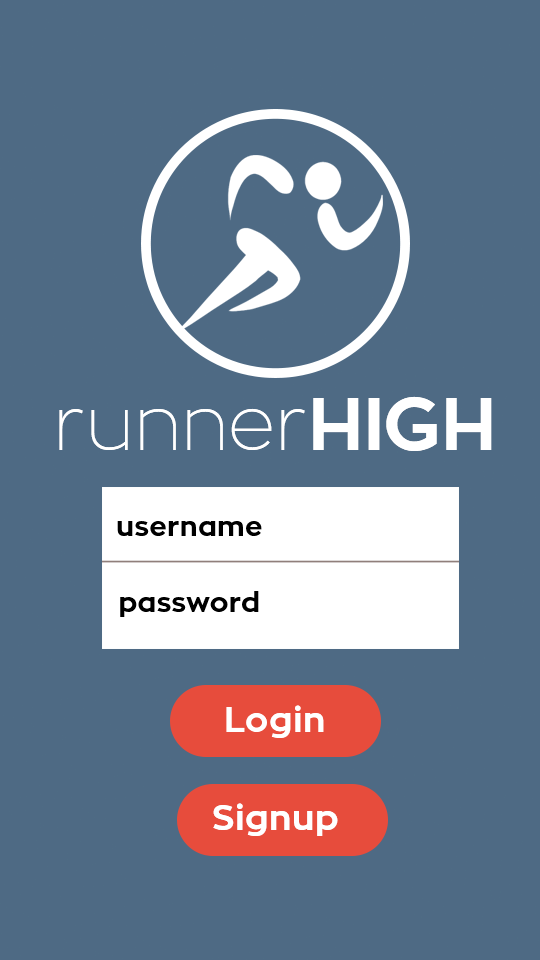
<style>
.page{position:relative;width:540px;height:960px;background:#4e6a84}
.page>*{position:absolute;margin:0}
.t1{font:74px "ZonaPro-Thin";color:#ffffff}
.t2{font:74px "ZonaPro-Bold";color:#ffffff}
.t3{font:27.8px "ZonaPro-Bold";letter-spacing:0.02em;color:#000000}
.t4{font:34.7px "ZonaPro-Bold";letter-spacing:0.02em;color:#ffffff}
</style>
<div class="page">
<p class="t1" style="left:59px;top:396px;width:433px;height:55px">runner<span class="t2">HIGH</span></p>
<p class="t3" style="left:117px;top:521px;width:145px;height:15px">username</p>
<p class="t3" style="left:120px;top:591px;width:139px;height:26px">password</p>
<p class="t4" style="left:213px;top:803px;width:125px;height:33px">Signup</p>
</div>
